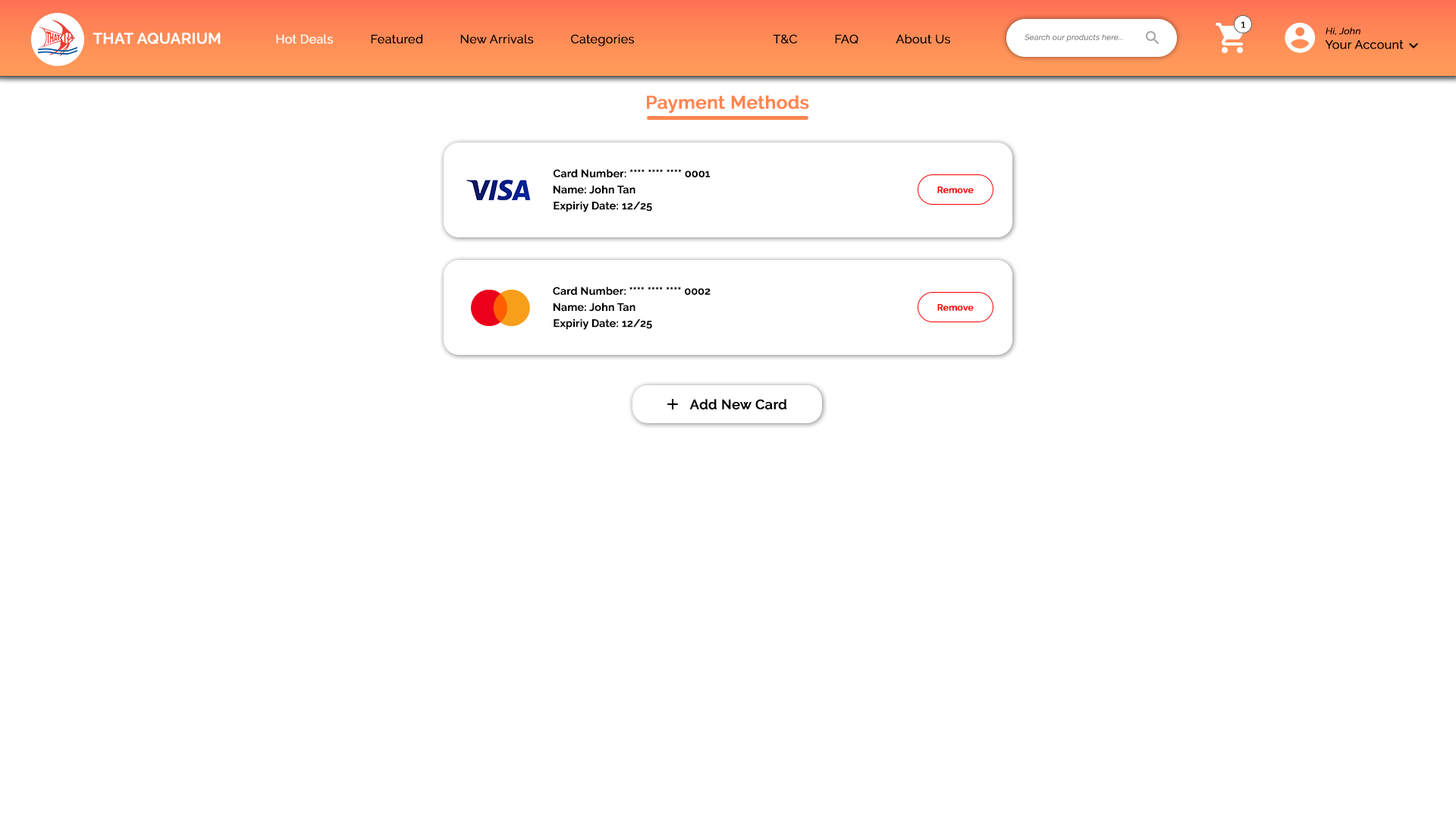
<style>
.page{position:relative;width:1456px;height:819px;background:#ffffff}
.page>*{position:absolute;margin:0}
.t1{font:10.6px "Raleway-Regular";color:#000000;font-weight:bold}
.t2{font:12.1px "Raleway-Regular";color:#000000;font-weight:bold}
.t3{font:9.1px "Raleway-Regular";color:#000000;font-weight:bold;font-style:italic}
.t4{font:15.2px "Raleway-SemiBold";color:#ffffff;font-weight:bold}
.t5{font:12.1px "Raleway-Regular";color:#ffffff;font-weight:bold}
.t6{font:7.6px "Raleway-Regular";color:#787878;font-weight:bold;font-style:italic}
.t7{font:18.2px "Raleway-SemiBold";color:#ff854f;font-weight:bold}
.t8{font:10.6px "Raleway-SemiBold";color:#000000;font-weight:bold}
.t9{font:9.1px "Raleway-SemiBold";color:#ff0000;font-weight:bold}
.t10{font:13.6px "Raleway-SemiBold";color:#000000;font-weight:bold}
</style>
<div class="page">
<p class="t1" style="left:1241px;top:21px;width:5px;height:7px">1</p>
<p class="t2" style="left:1325px;top:27px;width:79px;height:22px"><span class="t3">Hi, John<br></span>Your Account</p>
<p class="t4" style="left:93px;top:33px;width:128px;height:11px">THAT AQUARIUM</p>
<p class="t5" style="left:276px;top:34px;width:57px;height:10px">Hot Deals</p>
<p class="t2" style="left:371px;top:34px;width:52px;height:10px">Featured</p>
<p class="t2" style="left:460px;top:34px;width:74px;height:10px">New Arrivals</p>
<p class="t2" style="left:571px;top:34px;width:63px;height:12px">Categories</p>
<p class="t2" style="left:773px;top:34px;width:25px;height:10px">T&amp;C</p>
<p class="t2" style="left:835px;top:34px;width:23px;height:10px">FAQ</p>
<p class="t2" style="left:896px;top:34px;width:54px;height:10px">About Us</p>
<p class="t6" style="left:1024px;top:34px;width:99px;height:8px">Search our products here...</p>
<p class="t7" style="left:647px;top:95px;width:162px;height:18px">Payment Methods</p>
<p class="t8" style="left:553px;top:169px;width:158px;height:8px">Card Number: **** **** **** 0001</p>
<p class="t8" style="left:553px;top:185px;width:82px;height:9px">Name: John Tan</p>
<p class="t9" style="left:937px;top:187px;width:37px;height:6px">Remove</p>
<p class="t8" style="left:554px;top:201px;width:98px;height:11px">Expiriy Date: 12/25</p>
<p class="t8" style="left:553px;top:287px;width:158px;height:8px">Card Number: **** **** **** 0002</p>
<p class="t8" style="left:553px;top:303px;width:82px;height:9px">Name: John Tan</p>
<p class="t9" style="left:937px;top:304px;width:37px;height:7px">Remove</p>
<p class="t8" style="left:554px;top:318px;width:98px;height:12px">Expiriy Date: 12/25</p>
<p class="t10" style="left:689px;top:399px;width:98px;height:10px">Add New Card</p>
</div>
